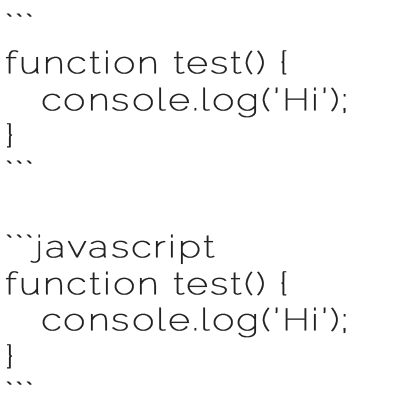
<style>
.page{position:relative;width:400px;height:410px;background:#ffffff}
.page>*{position:absolute;margin:0}
.t1{font:30.7px "Raleway-Thin";letter-spacing:0.05em;color:#222222;font-weight:bold;scale:1.2 1}
</style>
<div class="page">
<p class="t1" style="left:5px;top:13px;width:341px;height:372px">```<br>function test() {<br> console.log(’Hi’);<br>}<br>```<br><br>```javascript<br>function test() {<br> console.log(’Hi’);<br>}<br>```</p>
</div>
